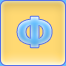
<style>
.page{position:relative;width:66px;height:66px}
.page>*{position:absolute;margin:0}
.t1{font:41px "Tahoma-Bold"}
</style>
<div class="page">
<p class="t1" style="left:17px;top:16px;width:35px;height:32px">Ф</p>
<p class="t1" style="left:17px;top:16px;width:35px;height:32px">Ф</p>
</div>
